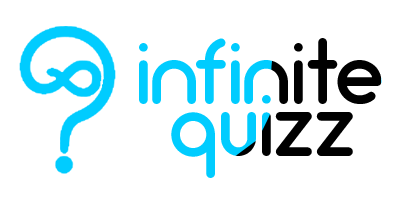
<style>
.page{position:relative;width:400px;height:200px;background:#ffffff}
.page>*{position:absolute;margin:0}
.t1{font:87.5px "Arciform"}
</style>
<div class="page">
<p class="t1" style="left:139px;top:38px;width:243px;height:66px">infinite</p>
<p class="t1" style="left:171px;top:95px;width:182px;height:83px">quizz</p>
</div>
